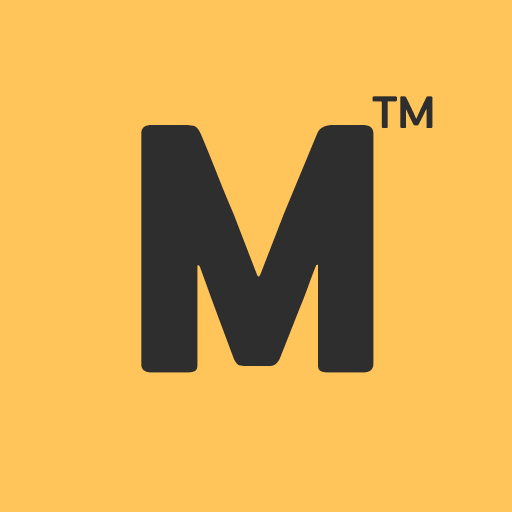
<style>
.page{position:relative;width:512px;height:512px;background:#ffc45a}
.page>*{position:absolute;margin:0}
.t1{font:72px "PFHandbookPro-Regular";letter-spacing:-0.02em;color:#2e2e2e}
.t2{font:400px "PFHandbookPro-Black";letter-spacing:-0.02em;color:#2e2e2e}
.t3{font:200px "PFHandbookPro-Black";letter-spacing:-0.02em;color:#2e2e2e}
</style>
<div class="page">
<p class="t1" style="left:372px;top:96px;width:61px;height:32px">тм</p>
<p class="t2" style="left:141px;top:125px;width:233px;height:248px"><span class="t3"><br><br><br><br><br><br></span>М</p>
</div>
